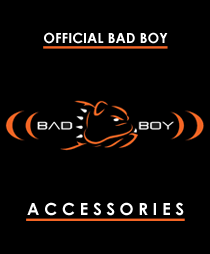
<style>
.page{position:relative;width:210px;height:254px;background:#000000}
.page>*{position:absolute;margin:0}
.t1{font:14px "CenturyGothic-Bold";color:#ffffff;text-transform:uppercase}
.t2{font:16.7px "CenturyGothic-Bold";color:#ffffff;text-transform:uppercase}
</style>
<div class="page">
<p class="t1" style="left:44px;top:32px;width:124px;height:12px">official Bad Boy</p>
<p class="t2" style="left:27px;top:202px;width:157px;height:14px">A c c e s s o r i e s</p>
</div>
